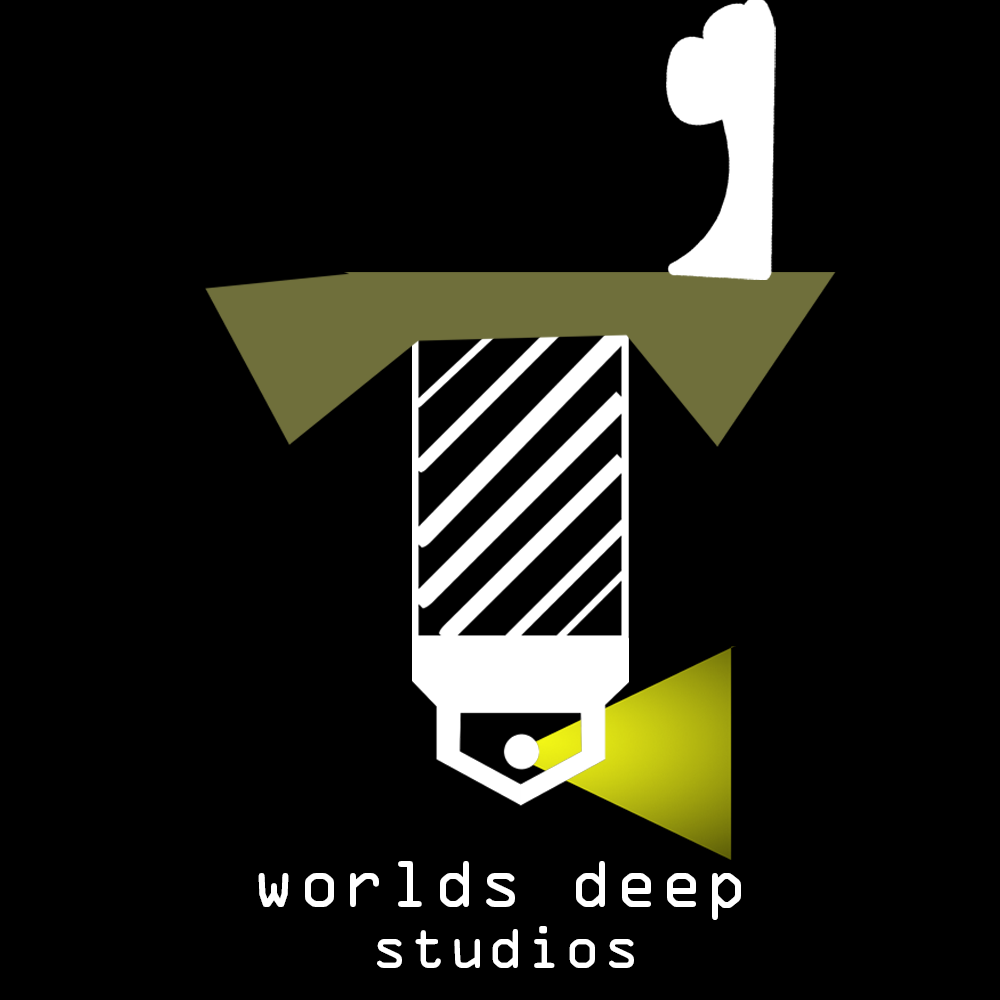
<style>
.page{position:relative;width:1000px;height:1000px;background:#000000}
.page>*{position:absolute;margin:0}
.t1{font:62.9px "OCRAStd";color:#ffffff}
.t2{font:53.5px "OCRAStd";color:#ffffff}
</style>
<div class="page">
<p class="t1" style="left:258px;top:861px;width:483px;height:59px">worlds deep</p>
<p class="t2" style="left:377px;top:926px;width:257px;height:42px">studios</p>
</div>
